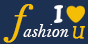
<style>
.page{position:relative;width:88px;height:44px;background:#1c3052}
.page>*{position:absolute;margin:0}
.t1{font:40px "BellMTItalic";color:#f5be06;font-weight:bold}
.t2{font:19.7px "BellMTItalic";color:#ffffff;scale:0.96 1}
.t3{font:16.9px "BookAntiqua-Italic";color:#ffc601;font-weight:bold;scale:0.96 1}
</style>
<div class="page">
<p class="t1" style="left:3px;top:4px;width:31px;height:39px">f</p>
<p class="t2" style="left:23px;top:24px;width:46px;height:13px">ashion</p>
<p class="t3" style="left:73px;top:26px;width:12px;height:13px">U</p>
</div>
